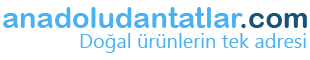
<style>
.page{position:relative;width:310px;height:60px;background:#ffffff}
.page>*{position:absolute;margin:0}
.t1{font:29px "ArialRoundedMTBold";color:#4ab2f1}
.t2{font:29px "ArialRoundedMTBold";color:#195377}
.t3{font:20px "SegoeUI";color:#4ab2f1}
</style>
<div class="page">
<p class="t1" style="left:3px;top:7px;width:304px;height:21px">anadoludantatlar<span class="t2">.com</span></p>
<p class="t3" style="left:80px;top:33px;width:226px;height:20px">Doğal ürünlerin tek adresi</p>
</div>
